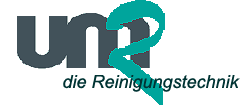
<style>
.page{position:relative;width:248px;height:105px;background:#ffffff}
.page>*{position:absolute;margin:0}
.t1{font:18px "Arial-ItalicMT";color:#003333}
</style>
<div class="page">
<p class="t1" style="left:63px;top:75px;width:177px;height:17px">die Reinigungstechnik</p>
</div>
